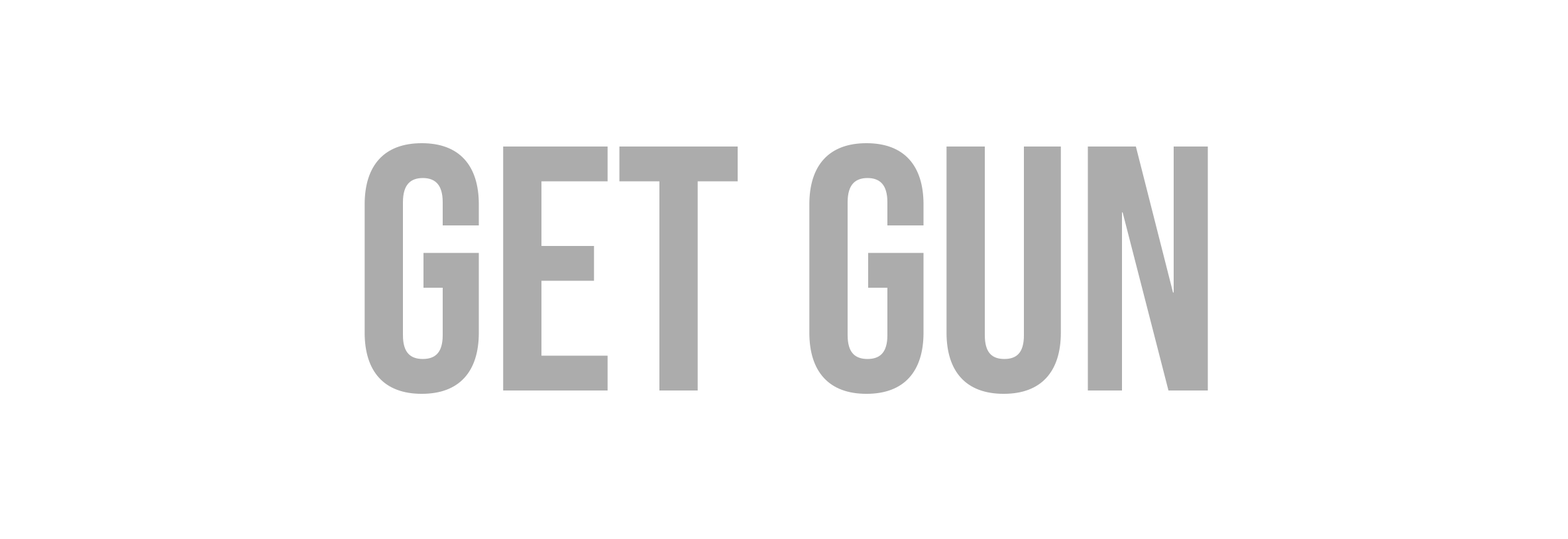
<style>
.page{position:relative;width:1568px;height:539px;background:#ffffff}
.page>*{position:absolute;margin:0}
.t1{font:348px "BebasNeue-Regular";color:#acacac}
</style>
<div class="page">
<p class="t1" style="left:364px;top:143px;width:844px;height:251px">get gun</p>
</div>
